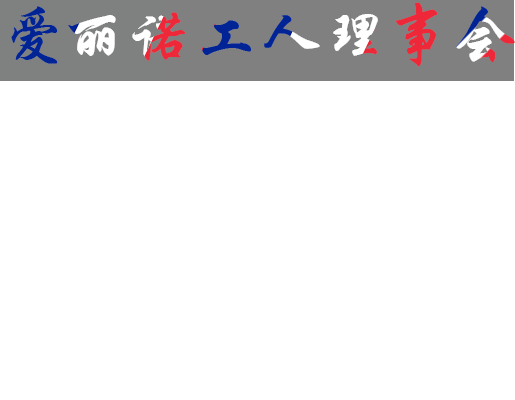
<style>
.page{position:relative;width:515px;height:400px;background:#ffffff}
.page>*{position:absolute;margin:0}
.t1{font:64.4px "STXingkai"}
</style>
<div class="page">
<p class="t1" style="left:11px;top:2px;width:504px;height:65px">爱丽诺工人理事会</p>
</div>
